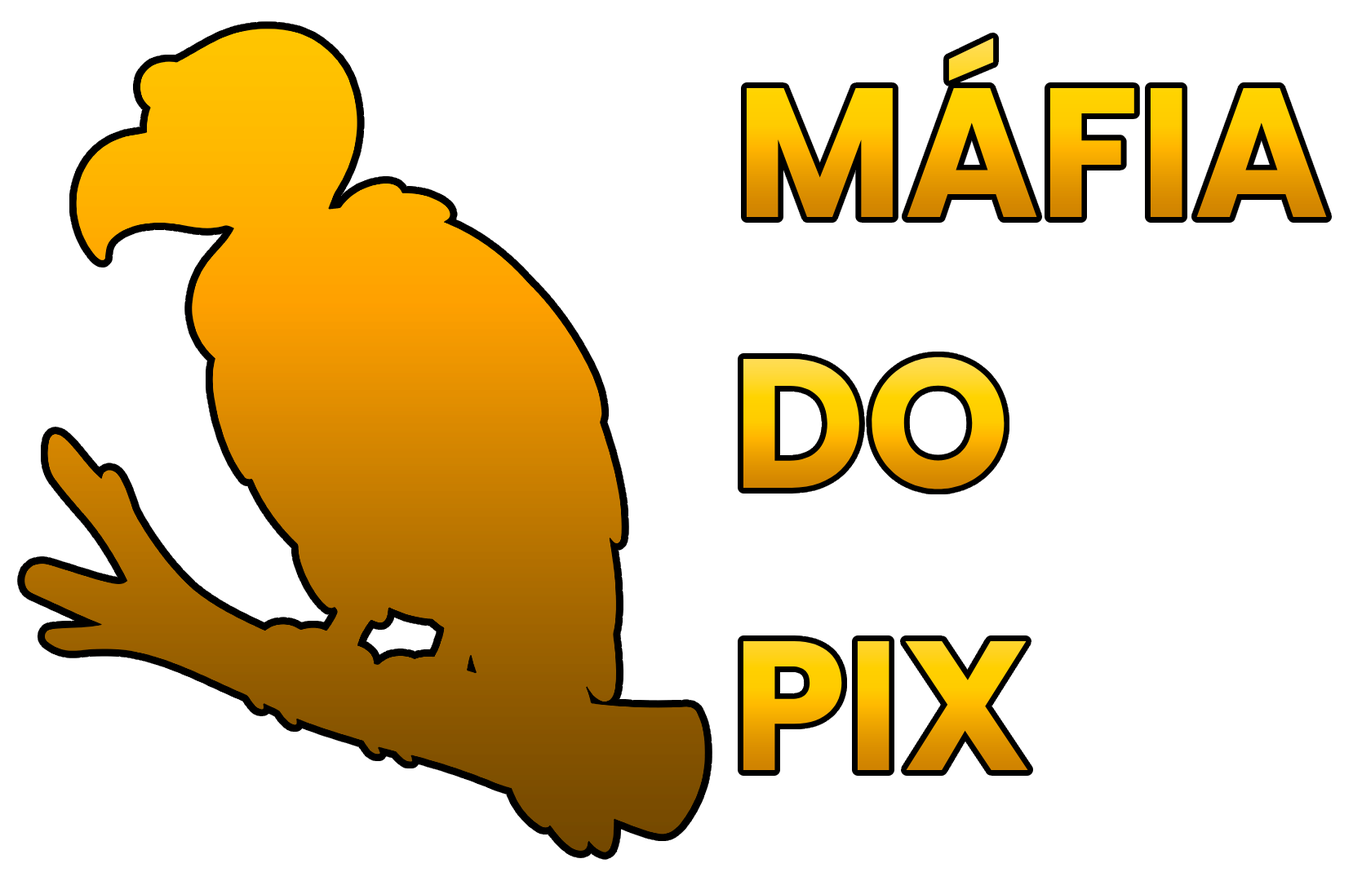
<style>
.page{position:relative;width:1353px;height:881px;background:#ffffff}
.page>*{position:absolute;margin:0}
.t1{font:183.6px "Poppins-Bold"}
</style>
<div class="page">
<p class="t1" style="left:746px;top:38px;width:581px;height:179px">MÁFIA</p>
<p class="t1" style="left:743px;top:357px;width:262px;height:133px">DO</p>
<p class="t1" style="left:743px;top:641px;width:285px;height:129px">PIX</p>
</div>
